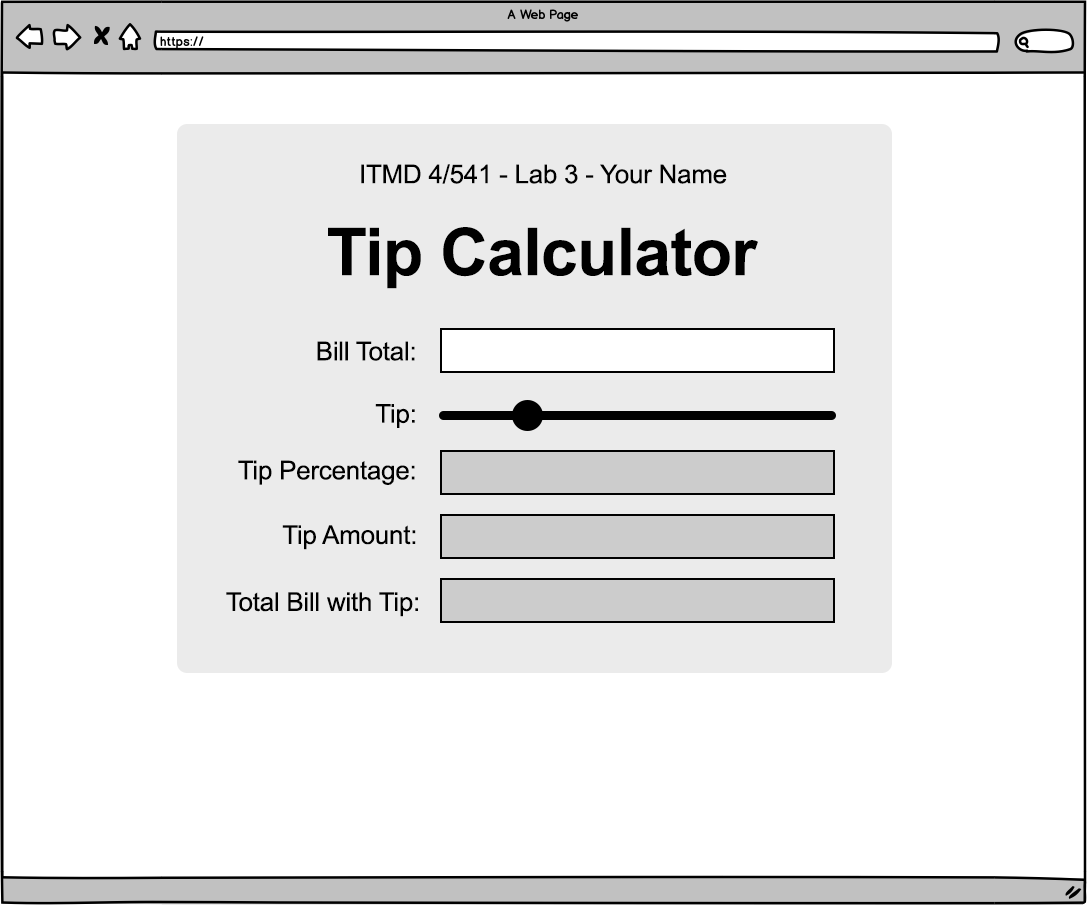
<style>
.page{position:relative;width:1087px;height:911px;background:#ffffff}
.page>*{position:absolute;margin:0}
.t1{font:26px "ArialMT";letter-spacing:-0.01em;color:#000000}
.t2{font:66px "Arial-BoldMT";letter-spacing:-0.01em;color:#000000}
</style>
<div class="page">
<p class="t1" style="left:361px;top:164px;width:366px;height:20px">ITMD 4/541 - Lab 3 - Your Name</p>
<p class="t2" style="left:328px;top:227px;width:430px;height:62px">Tip Calculator</p>
<p class="t1" style="left:317px;top:341px;width:98px;height:20px">Bill Total:</p>
<p class="t1" style="left:375px;top:404px;width:40px;height:24px">Tip:</p>
<p class="t1" style="left:238px;top:460px;width:177px;height:25px">Tip Percentage:</p>
<p class="t1" style="left:282px;top:525px;width:134px;height:25px">Tip Amount:</p>
<p class="t1" style="left:226px;top:592px;width:192px;height:25px">Total Bill with Tip:</p>
</div>
